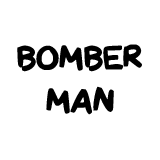
<style>
.page{position:relative;width:160px;height:160px;background:#ffffff}
.page>*{position:absolute;margin:0}
.t1{font:35.9px "QAReports";color:#000000}
</style>
<div class="page">
<p class="t1" style="left:17px;top:44px;width:125px;height:71px;text-align:center">BOMBER<br>MAN</p>
</div>
